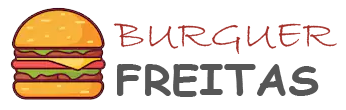
<style>
.page{position:relative;width:346px;height:110px;background:#ffffff}
.page>*{position:absolute;margin:0}
.t1{font:41.4px "BradleyHandITC";color:#a3302a;scale:1.09 1}
.t2{font:41.4px "ComicSansMS-Bold";color:#565656;scale:1.09 1}
</style>
<div class="page">
<p class="t1" style="left:113px;top:23px;width:224px;height:74px">BURGUER<br><span class="t2">FREITAS</span></p>
</div>
